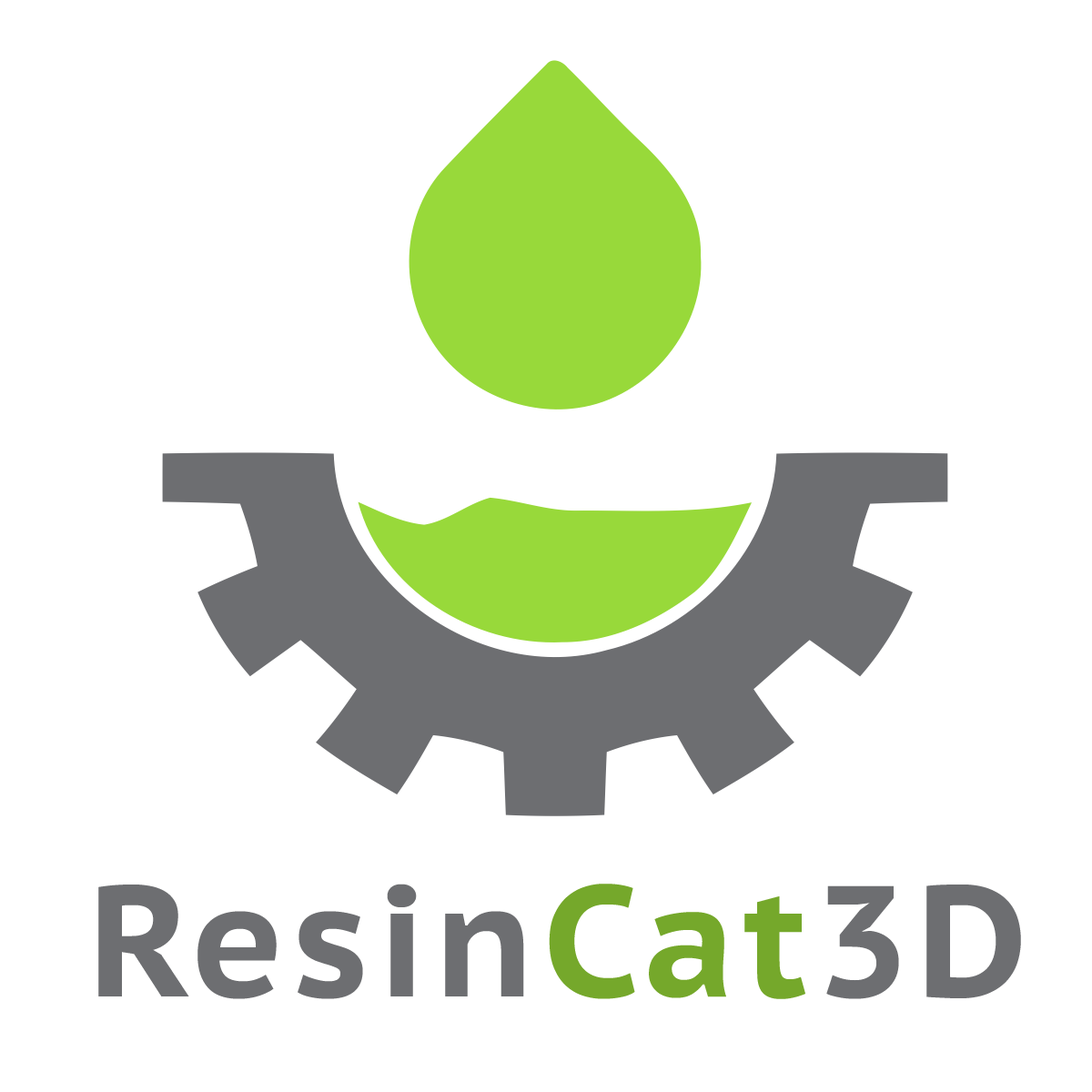
<style>
.page{position:relative;width:1092px;height:1092px;background:#ffffff}
.page>*{position:absolute;margin:0}
.t1{font:157.8px "PTSans-CaptionBold";letter-spacing:0.05em;color:#6d6e71}
.t2{font:157.8px "PTSans-CaptionBold";letter-spacing:0.05em;color:#75a82b}
</style>
<div class="page">
<p class="t1" style="left:98px;top:884px;width:923px;height:115px">Resin<span class="t2">Cat</span>3D</p>
</div>
